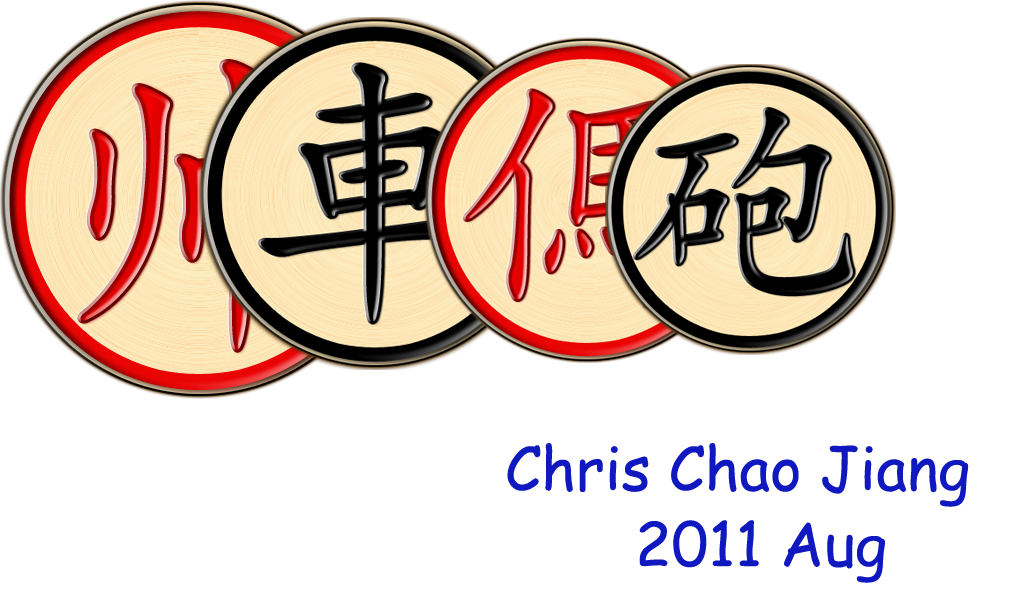
<style>
.page{position:relative;width:1024px;height:600px;background:#ffffff}
.page>*{position:absolute;margin:0}
.t1{font:60px "ComicSansMS";color:#1019bf}
</style>
<div class="page">
<p class="t1" style="left:507px;top:443px;width:462px;height:64px">Chris Chao Jiang</p>
<p class="t1" style="left:639px;top:520px;width:246px;height:63px">2011 Aug</p>
</div>
